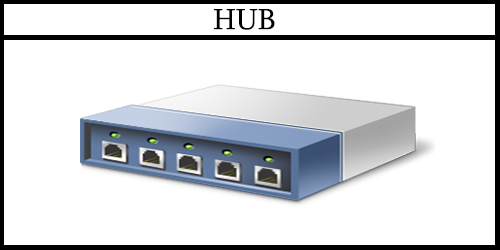
<style>
.page{position:relative;width:500px;height:250px;background:#ffffff}
.page>*{position:absolute;margin:0}
.t1{font:30px "Sylfaen";color:#000000}
</style>
<div class="page">
<p class="t1" style="left:214px;top:9px;width:61px;height:21px">HUB</p>
</div>
